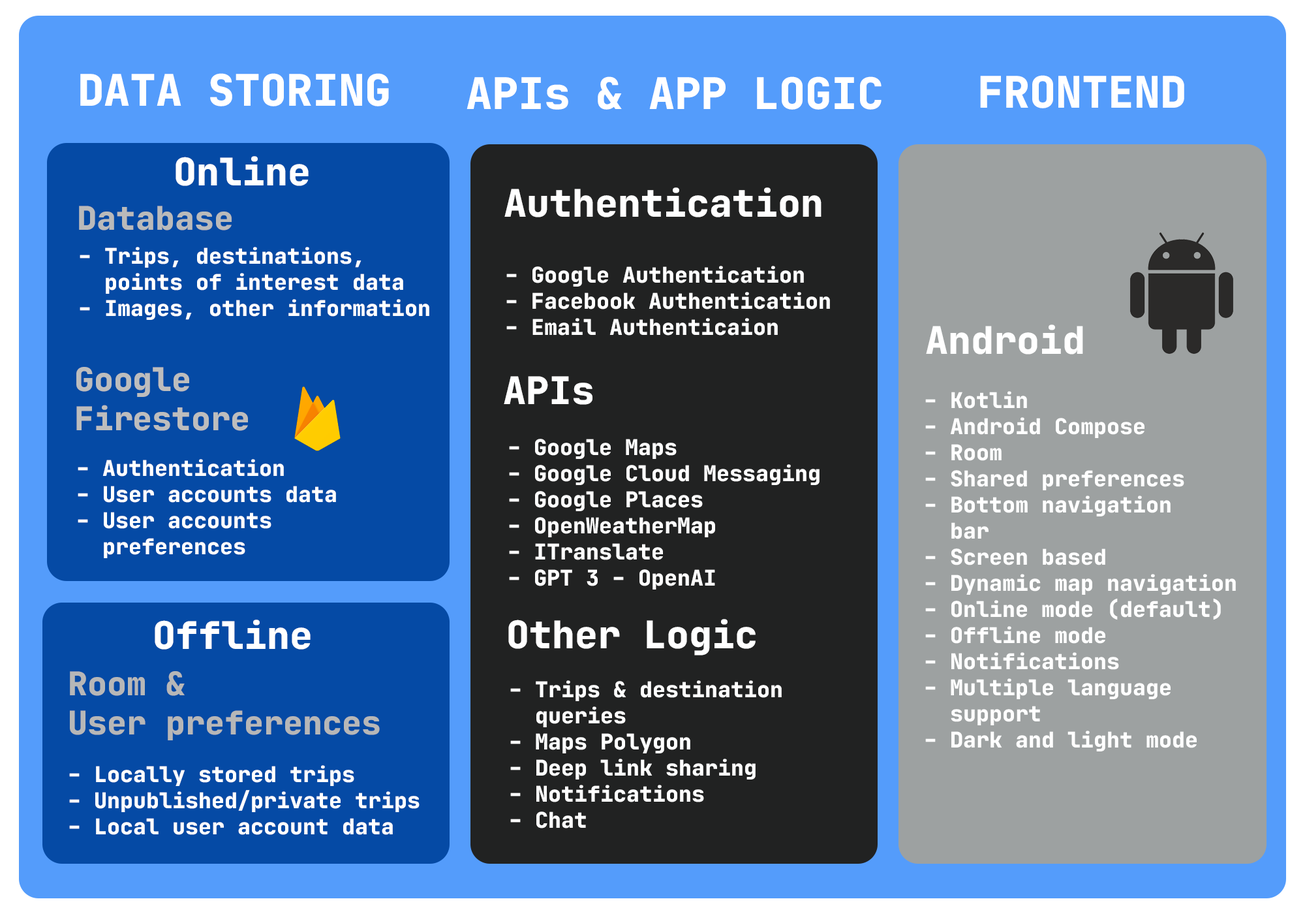
<style>
.page{position:relative;width:1305px;height:914px}
.page>*{position:absolute;margin:0}
.t1{font:43.5px "JetBrainsMono-ExtraBold";color:#ffffff}
.t2{font:38.1px "JetBrainsMono-ExtraBold";color:#ffffff}
.t3{font:32.6px "JetBrainsMono-ExtraBold";color:#bababa}
.t4{font:21.8px "JetBrainsMono-ExtraBold";color:#ffffff}
.t5{font:32.6px "JetBrainsMono-ExtraBold";color:#bdbdbd}
.t6{font:32.6px "JetBrainsMono-ExtraBold";color:#b7b7b7}
</style>
<div class="page">
<p class="t1" style="left:80px;top:73px;width:309px;height:33px">DATA STORING</p>
<p class="t1" style="left:467px;top:76px;width:415px;height:34px">APIs &amp; APP LOGIC</p>
<p class="t1" style="left:980px;top:75px;width:204px;height:33px">FRONTEND</p>
<p class="t2" style="left:176px;top:156px;width:133px;height:30px">Online</p>
<p class="t2" style="left:504px;top:187px;width:318px;height:30px">Authentication</p>
<p class="t3" style="left:79px;top:206px;width:153px;height:24px">Database</p>
<p class="t4" style="left:80px;top:247px;width:349px;height:73px">- Trips, destinations,<br>  points of interest data<br>- Images, other information</p>
<p class="t4" style="left:506px;top:266px;width:324px;height:69px">- Google Authentication<br>- Facebook Authentication<br>- Email Authenticaion</p>
<p class="t2" style="left:926px;top:324px;width:157px;height:30px">Android</p>
<p class="t5" style="left:76px;top:367px;width:172px;height:64px">Google<br>Firestore</p>
<p class="t2" style="left:504px;top:376px;width:89px;height:29px">APIs</p>
<p class="t4" style="left:925px;top:391px;width:311px;height:360px">- Kotlin<br>- Android Compose<br>- Room<br>- Shared preferences<br>- Bottom navigation<br>  bar<br>- Screen based<br>- Dynamic map navigation<br>- Online mode (default)<br>- Offline mode<br>- Notifications<br>- Multiple language <br>  support<br>- Dark and light mode</p>
<p class="t4" style="left:509px;top:439px;width:311px;height:150px">- Google Maps<br>- Google Cloud Messaging<br>- Google Places<br>- OpenWeatherMap<br>- ITranslate<br>- GPT 3 - OpenAI</p>
<p class="t4" style="left:78px;top:459px;width:258px;height:99px">- Authentication<br>- User accounts data<br>- User accounts <br>  preferences</p>
<p class="t2" style="left:155px;top:619px;width:156px;height:30px">Offline</p>
<p class="t2" style="left:508px;top:619px;width:248px;height:36px">Other Logic</p>
<p class="t6" style="left:70px;top:671px;width:310px;height:69px">Room &amp;<br>User preferences</p>
<p class="t4" style="left:510px;top:680px;width:272px;height:148px">- Trips &amp; destination<br>  queries<br>- Maps Polygon<br>- Deep link sharing<br>- Notifications<br>- Chat</p>
<p class="t4" style="left:69px;top:765px;width:351px;height:70px">- Locally stored trips<br>- Unpublished/private trips<br>- Local user account data</p>
</div>
